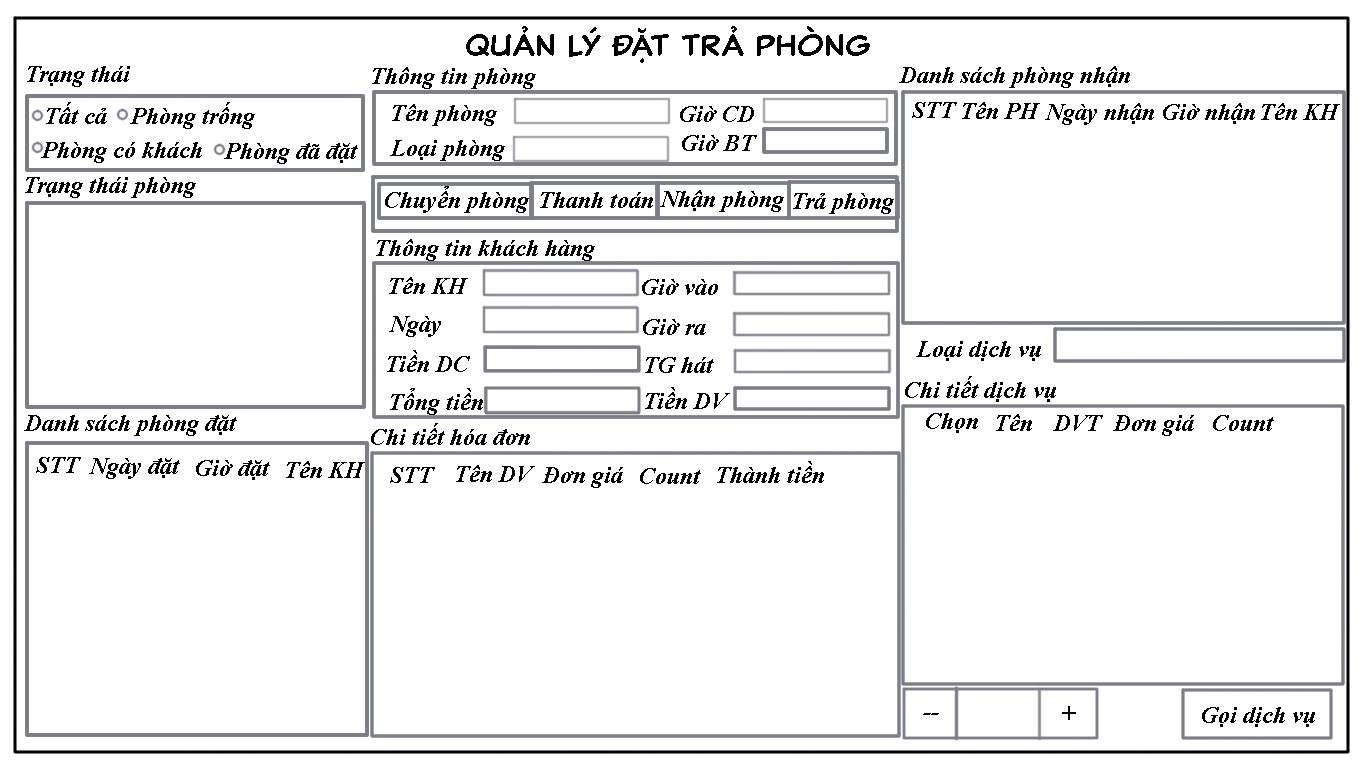
<style>
.page{position:relative;width:1366px;height:768px;background:#ffffff}
.page>*{position:absolute;margin:0}
.t1{font:30px "000ClassicComicTB-Normal";color:#010002}
.t2{font:24px "TimesNewRomanPS-BoldItalicMT";color:#010002}
</style>
<div class="page">
<p class="t1" style="left:466px;top:26px;width:404px;height:37px">quản lý đặt trả phòng</p>
<p class="t2" style="left:27px;top:66px;width:103px;height:21px">Trạng thái</p>
<p class="t2" style="left:372px;top:67px;width:164px;height:22px">Thông tin phòng</p>
<p class="t2" style="left:899px;top:66px;width:231px;height:22px">Danh sách phòng nhận</p>
<p class="t2" style="left:46px;top:102px;width:61px;height:22px">Tất cả</p>
<p class="t2" style="left:130px;top:102px;width:125px;height:27px">Phòng trống</p>
<p class="t2" style="left:912px;top:102px;width:45px;height:16px">STT</p>
<p class="t2" style="left:962px;top:102px;width:78px;height:17px">Tên PH</p>
<p class="t2" style="left:392px;top:104px;width:105px;height:22px">Tên phòng</p>
<p class="t2" style="left:680px;top:106px;width:74px;height:16px">Giờ CD</p>
<p class="t2" style="left:1045px;top:103px;width:109px;height:22px">Ngày nhận</p>
<p class="t2" style="left:1163px;top:103px;width:92px;height:21px">Giờ nhận</p>
<p class="t2" style="left:1261px;top:103px;width:79px;height:17px">Tên KH</p>
<p class="t2" style="left:682px;top:135px;width:75px;height:16px">Giờ BT</p>
<p class="t2" style="left:41px;top:142px;width:161px;height:21px">Phòng có khách</p>
<p class="t2" style="left:224px;top:143px;width:134px;height:21px">Phòng đã đặt</p>
<p class="t2" style="left:390px;top:140px;width:115px;height:21px">Loại phòng</p>
<p class="t2" style="left:25px;top:177px;width:171px;height:21px">Trạng thái phòng</p>
<p class="t2" style="left:385px;top:186px;width:144px;height:27px">Chuyển phòng</p>
<p class="t2" style="left:540px;top:192px;width:113px;height:16px">Thanh toán</p>
<p class="t2" style="left:660px;top:190px;width:124px;height:22px">Nhận phòng</p>
<p class="t2" style="left:793px;top:193px;width:101px;height:21px">Trả phòng</p>
<p class="t2" style="left:376px;top:239px;width:219px;height:22px">Thông tin khách hàng</p>
<p class="t2" style="left:389px;top:277px;width:79px;height:17px">Tên KH</p>
<p class="t2" style="left:642px;top:279px;width:76px;height:16px">Giờ vào</p>
<p class="t2" style="left:389px;top:316px;width:52px;height:21px">Ngày</p>
<p class="t2" style="left:643px;top:319px;width:63px;height:16px">Giờ ra</p>
<p class="t2" style="left:916px;top:341px;width:125px;height:20px">Loại dịch vụ</p>
<p class="t2" style="left:387px;top:350px;width:83px;height:22px">Tiền DC</p>
<p class="t2" style="left:645px;top:357px;width:69px;height:16px">TG hát</p>
<p class="t2" style="left:905px;top:376px;width:151px;height:26px">Chi tiết dịch vụ</p>
<p class="t2" style="left:390px;top:388px;width:93px;height:27px">Tổng tiền</p>
<p class="t2" style="left:645px;top:387px;width:85px;height:22px">Tiền DV</p>
<p class="t2" style="left:926px;top:413px;width:52px;height:20px">Chọn</p>
<p class="t2" style="left:996px;top:414px;width:36px;height:17px">Tên</p>
<p class="t2" style="left:24px;top:415px;width:213px;height:21px">Danh sách phòng đặt</p>
<p class="t2" style="left:371px;top:423px;width:159px;height:22px">Chi tiết hóa đơn</p>
<p class="t2" style="left:1053px;top:415px;width:50px;height:16px">DVT</p>
<p class="t2" style="left:1113px;top:415px;width:81px;height:21px">Đơn giá</p>
<p class="t2" style="left:1213px;top:415px;width:61px;height:16px">Count</p>
<p class="t2" style="left:36px;top:457px;width:45px;height:16px">STT</p>
<p class="t2" style="left:89px;top:458px;width:91px;height:21px">Ngày đặt</p>
<p class="t2" style="left:196px;top:460px;width:74px;height:20px">Giờ đặt</p>
<p class="t2" style="left:286px;top:461px;width:79px;height:17px">Tên KH</p>
<p class="t2" style="left:717px;top:461px;width:107px;height:22px">Thành tiền</p>
<p class="t2" style="left:390px;top:467px;width:45px;height:16px">STT</p>
<p class="t2" style="left:456px;top:465px;width:79px;height:17px">Tên DV</p>
<p class="t2" style="left:542px;top:467px;width:81px;height:21px">Đơn giá</p>
<p class="t2" style="left:640px;top:468px;width:61px;height:16px">Count</p>
<p class="t2" style="left:923px;top:713px;width:16px;height:2px">--</p>
<p class="t2" style="left:1062px;top:706px;width:14px;height:14px">+</p>
<p class="t2" style="left:1202px;top:707px;width:113px;height:20px">Gọi dịch vụ</p>
</div>
